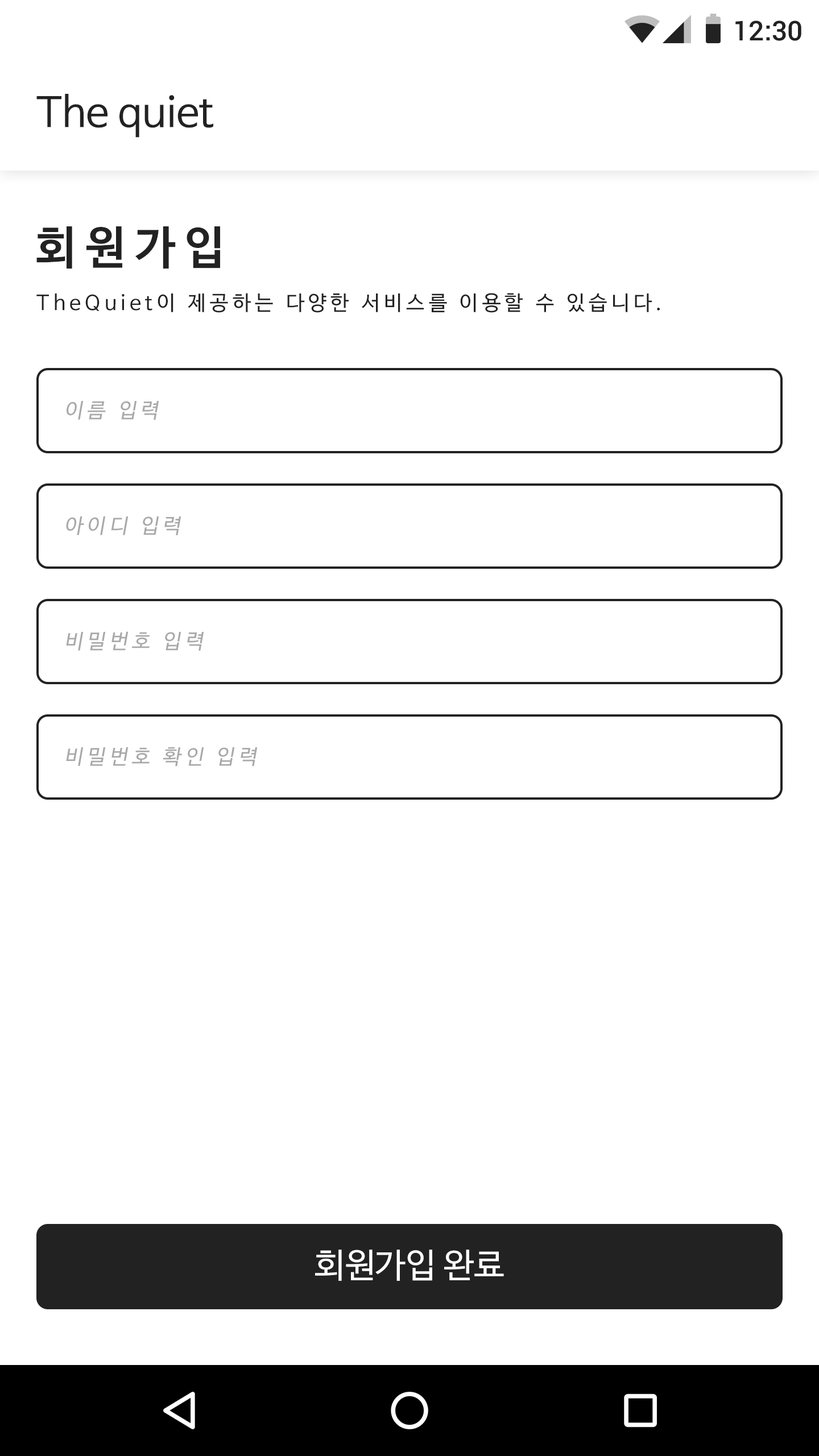
<style>
.page{position:relative;width:819px;height:1456px;background:#ffffff}
.page>*{position:absolute;margin:0}
.t1{font:27.3px "Roboto-Medium";color:#222222}
.t2{font:40.9px "NanumBarunGothic";color:#222222}
.t3{font:45.5px "NanumBarunGothicBold";letter-spacing:0.2em;color:#222222}
.t4{font:20.5px "NanumBarunGothic";letter-spacing:0.2em;color:#222222}
.t5{font:20.5px "NanumBarunGothic";letter-spacing:0.2em;color:#a9a9a9;font-style:italic}
.t6{font:34.1px "NanumBarunGothic";color:#ffffff}
</style>
<div class="page">
<p class="t1" style="left:735px;top:20px;width:66px;height:21px">12:30</p>
<p class="t2" style="left:36px;top:94px;width:177px;height:44px">The quiet</p>
<p class="t3" style="left:36px;top:226px;width:184px;height:43px">회원가입</p>
<p class="t4" style="left:36px;top:293px;width:624px;height:20px">TheQuiet이 제공하는 다양한 서비스를 이용할 수 있습니다.</p>
<p class="t5" style="left:67px;top:401px;width:92px;height:19px">이름 입력</p>
<p class="t5" style="left:66px;top:516px;width:115px;height:19px">아이디 입력</p>
<p class="t5" style="left:66px;top:631px;width:138px;height:20px">비밀번호 입력</p>
<p class="t5" style="left:66px;top:747px;width:192px;height:19px">비밀번호 확인 입력</p>
<p class="t6" style="left:315px;top:1250px;width:189px;height:31px">회원가입 완료</p>
</div>
